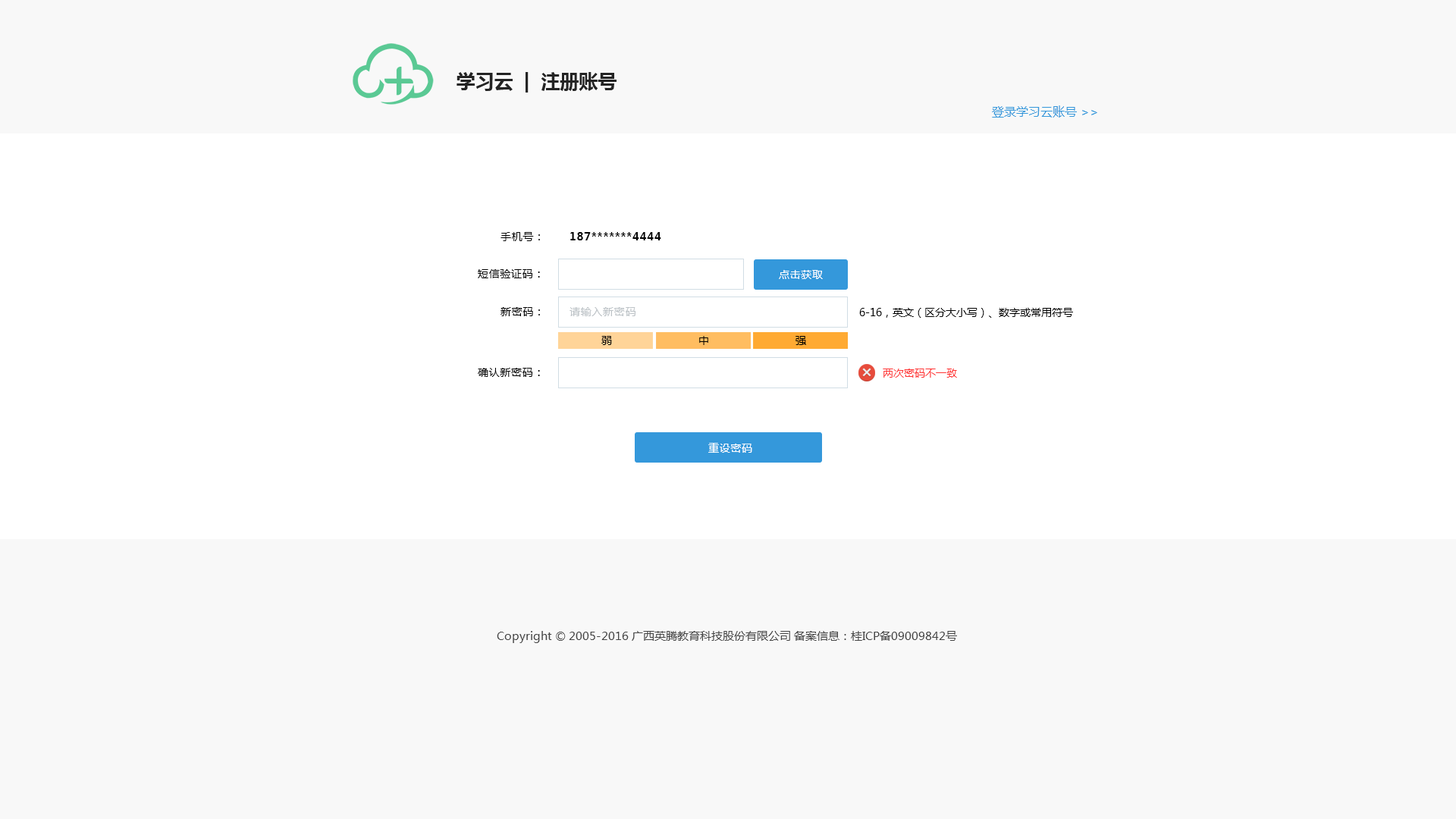
<style>
.page{position:relative;width:1456px;height:819px;background:#f8f8f8}
.page>*{position:absolute;margin:0}
.t1{font:19px "MicrosoftYaHei-Bold";color:#242424}
.t2{font:12.1px "MicrosoftYaHei";color:#3498db}
.t3{font:10.6px "MicrosoftYaHei";letter-spacing:0.05em;color:#000000}
.t4{font:10.6px "MicrosoftYaHei-Bold";letter-spacing:0.05em;color:#000000}
.t5{font:10.6px "MicrosoftYaHei";letter-spacing:0.05em;color:#ffffff}
.t6{font:10.6px "MicrosoftYaHei";letter-spacing:0.05em;color:#bdc3c7}
.t7{font:10.6px "MicrosoftYaHei";color:#000000}
.t8{font:10.6px "MicrosoftYaHei";color:#ff3434}
.t9{font:11.4px "MicrosoftYaHei";color:#464646}
</style>
<div class="page">
<p class="t1" style="left:457px;top:72px;width:160px;height:21px">学习云  |  注册账号</p>
<p class="t2" style="left:992px;top:105px;width:105px;height:13px">登录学习云账号 &gt;&gt;</p>
<p class="t3" style="left:500px;top:232px;width:40px;height:9px">手机号：</p>
<p class="t4" style="left:570px;top:232px;width:91px;height:8px">187*******4444</p>
<p class="t3" style="left:478px;top:269px;width:62px;height:9px">短信验证码：</p>
<p class="t5" style="left:779px;top:270px;width:44px;height:9px">点击获取</p>
<p class="t3" style="left:500px;top:307px;width:40px;height:9px">新密码：</p>
<p class="t6" style="left:570px;top:307px;width:65px;height:9px">请输入新密码</p>
<p class="t7" style="left:859px;top:308px;width:214px;height:10px">6-16，英文（区分大小写）、数字或常用符号</p>
<p class="t3" style="left:601px;top:336px;width:11px;height:9px">弱</p>
<p class="t3" style="left:699px;top:336px;width:9px;height:9px">中</p>
<p class="t3" style="left:795px;top:336px;width:11px;height:9px">强</p>
<p class="t3" style="left:478px;top:368px;width:62px;height:9px">确认新密码：</p>
<p class="t8" style="left:883px;top:369px;width:74px;height:9px">两次密码不一致</p>
<p class="t5" style="left:708px;top:443px;width:44px;height:10px">重设密码</p>
<p class="t9" style="left:497px;top:631px;width:460px;height:12px">Copyright © 2005-2016 广西英腾教育科技股份有限公司 备案信息：桂ICP备09009842号</p>
</div>
